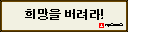
<style>
.page{position:relative;width:160px;height:32px;background:#f2f1e2}
.page>*{position:absolute;margin:0}
.t1{font:12px "AdobeGothicStd-Bold";color:#000000}
</style>
<div class="page">
<p class="t1" style="left:25px;top:8px;width:78px;height:12px">희망을 버려라!</p>
</div>
